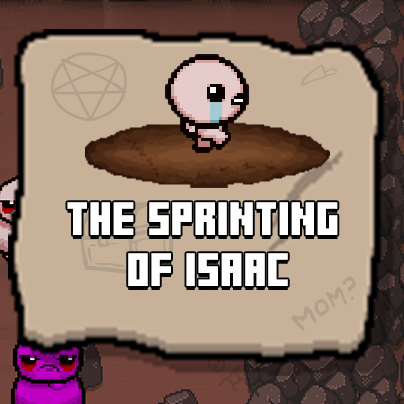
<style>
.page{position:relative;width:404px;height:404px;background:#c7b199}
.page>*{position:absolute;margin:0}
.t1{font:33.6px/51px "MinercraftoryRegular";letter-spacing:0.025em;color:#ffffff;text-transform:uppercase;scale:0.86 1}
</style>
<div class="page">
<p class="t1" style="left:67px;top:202px;width:271px;height:84px;text-align:center">The sprinting <br>of Isaac</p>
</div>
